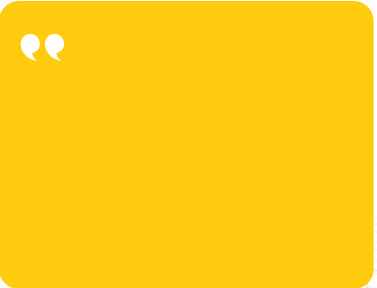
<style>
.page{position:relative;width:377px;height:288px;background:#ffcb0f}
.page>*{position:absolute;margin:0}
.t1{font:58.1px "GillSansMT-UltraBold";color:#ffffff}
</style>
<div class="page">
<p class="t1" style="left:20px;top:34px;width:44px;height:27px;rotate:180deg">”</p>
</div>
